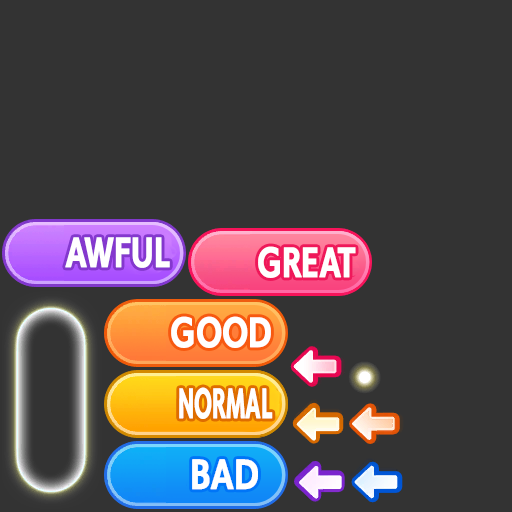
<style>
.page{position:relative;width:512px;height:512px;background:#333333}
.page>*{position:absolute;margin:0}
.t1{font:34.7px "UMAE_UDKakugo_SmallPr6-E";letter-spacing:-0.005em;color:#ffffff;font-weight:bold;scale:0.75 1}
.t2{font:34.7px "UMAE_UDKakugo_SmallPr6-E";letter-spacing:-0.005em;color:#ffffff;font-weight:bold;scale:0.76 1}
.t3{font:34.7px "UMAE_UDKakugo_SmallPr6-E";letter-spacing:-0.005em;color:#ffffff;font-weight:bold;scale:0.78 1}
.t4{font:34.7px "UMAE_UDKakugo_SmallPr6-E";letter-spacing:-0.005em;color:#ffffff;font-weight:bold;scale:0.53 1}
.t5{font:34.7px "UMAE_UDKakugo_SmallPr6-E";letter-spacing:-0.005em;color:#ffffff;font-weight:bold;scale:0.83 1}
</style>
<div class="page">
<p class="t1" style="left:65px;top:237px;width:105px;height:31px">AWFUL</p>
<p class="t2" style="left:258px;top:246px;width:98px;height:32px">GREAT</p>
<p class="t3" style="left:171px;top:316px;width:100px;height:32px">GOOD</p>
<p class="t4" style="left:179px;top:387px;width:94px;height:32px">NORMAL</p>
<p class="t5" style="left:192px;top:459px;width:66px;height:31px">BAD</p>
</div>
